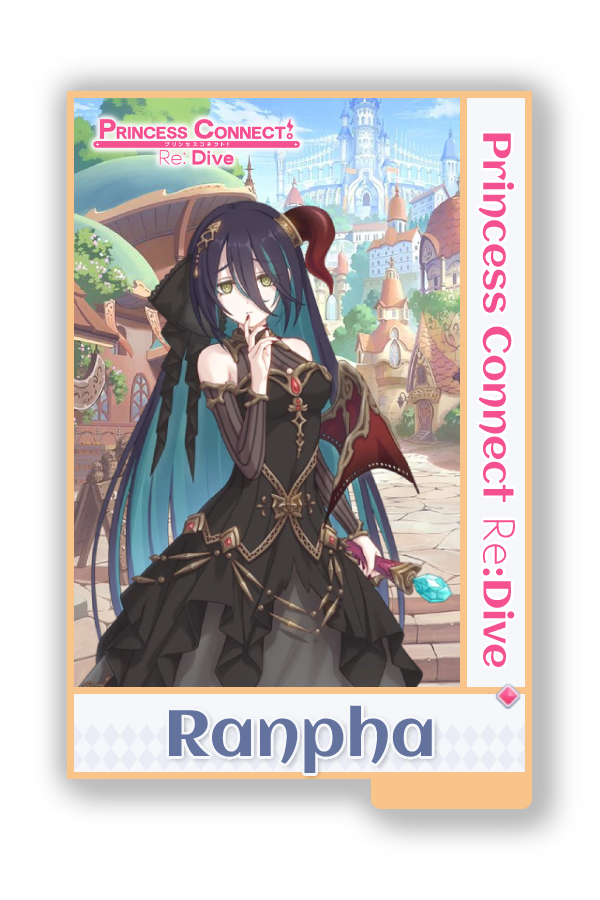
<style>
.page{position:relative;width:600px;height:900px;background:#ffffff}
.page>*{position:absolute;margin:0}
.t1{font:39px "Aclonica-Regular";color:#f55191}
.t2{font:39px "AaarghNormal";color:#f55191}
.t3{font:65px "Aclonica-Regular";color:#64739d}
</style>
<div class="page">
<p class="t1" style="left:478px;top:133px;width:38px;height:534px;rotate:90deg">Princess Connect <span class="t2">Re</span>:Dive</p>
<p class="t3" style="left:168px;top:705px;width:264px;height:68px">Ranpha</p>
</div>
